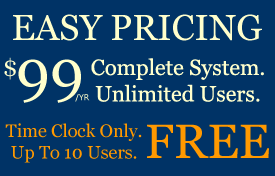
<style>
.page{position:relative;width:275px;height:176px;background:#003366}
.page>*{position:absolute;margin:0}
.t1{font:36px "Georgia";color:#ffffcc}
.t2{font:24px "Georgia";color:#ffffcc}
.t3{font:60px "Georgia";color:#ffffcc}
.t4{font:22px "Georgia";color:#ffffcc}
.t5{font:8px "Verdana"}
.t6{font:18px "Georgia";color:#ff9900}
.t7{font:48px "Georgia";color:#ff9900}
</style>
<div class="page">
<p class="t1" style="left:13px;top:14px;width:249px;height:27px">EASY PRICING</p>
<p class="t2" style="left:4px;top:57px;width:12px;height:23px">$</p>
<p class="t3" style="left:18px;top:59px;width:63px;height:44px">99</p>
<p class="t4" style="left:91px;top:58px;width:173px;height:44px;text-align:center">Complete System.<br>Unlimited Users.</p>
<p class="t5" style="left:75px;top:94px;width:15px;height:8px">/YR</p>
<p class="t6" style="left:5px;top:123px;width:137px;height:40px;text-align:center">Time Clock Only.<br>Up To 10 Users.</p>
<p class="t7" style="left:147px;top:124px;width:122px;height:34px">FREE</p>
</div>
